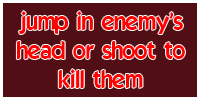
<style>
.page{position:relative;width:200px;height:100px;background:#510e15}
.page>*{position:absolute;margin:0}
.t1{font:24px "ELEGANCE";color:#ff0000}
</style>
<div class="page">
<p class="t1" style="left:16px;top:11px;width:169px;height:77px;text-align:center">jump in enemy's<br>head or shoot to<br>kill them</p>
</div>
